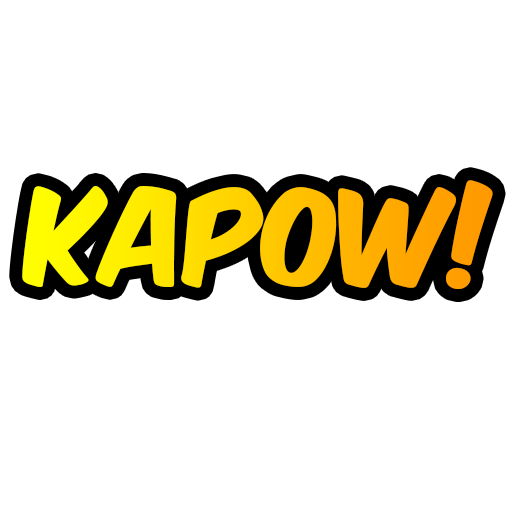
<style>
.page{position:relative;width:512px;height:512px;background:#ffffff}
.page>*{position:absolute;margin:0}
.t1{font:112.5px "KomikaAxis"}
</style>
<div class="page">
<p class="t1" style="left:22px;top:180px;width:471px;height:109px">KAPOW!</p>
</div>
